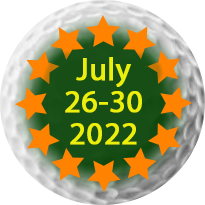
<style>
.page{position:relative;width:205px;height:205px;background:#ffffff}
.page>*{position:absolute;margin:0}
.t1{font:32px/32px "MyriadPro-Regular";color:#ecef0b;font-weight:bold}
</style>
<div class="page">
<p class="t1" style="left:65px;top:57px;width:77px;height:88px;text-align:center">July<br>26-30<br>2022</p>
</div>
